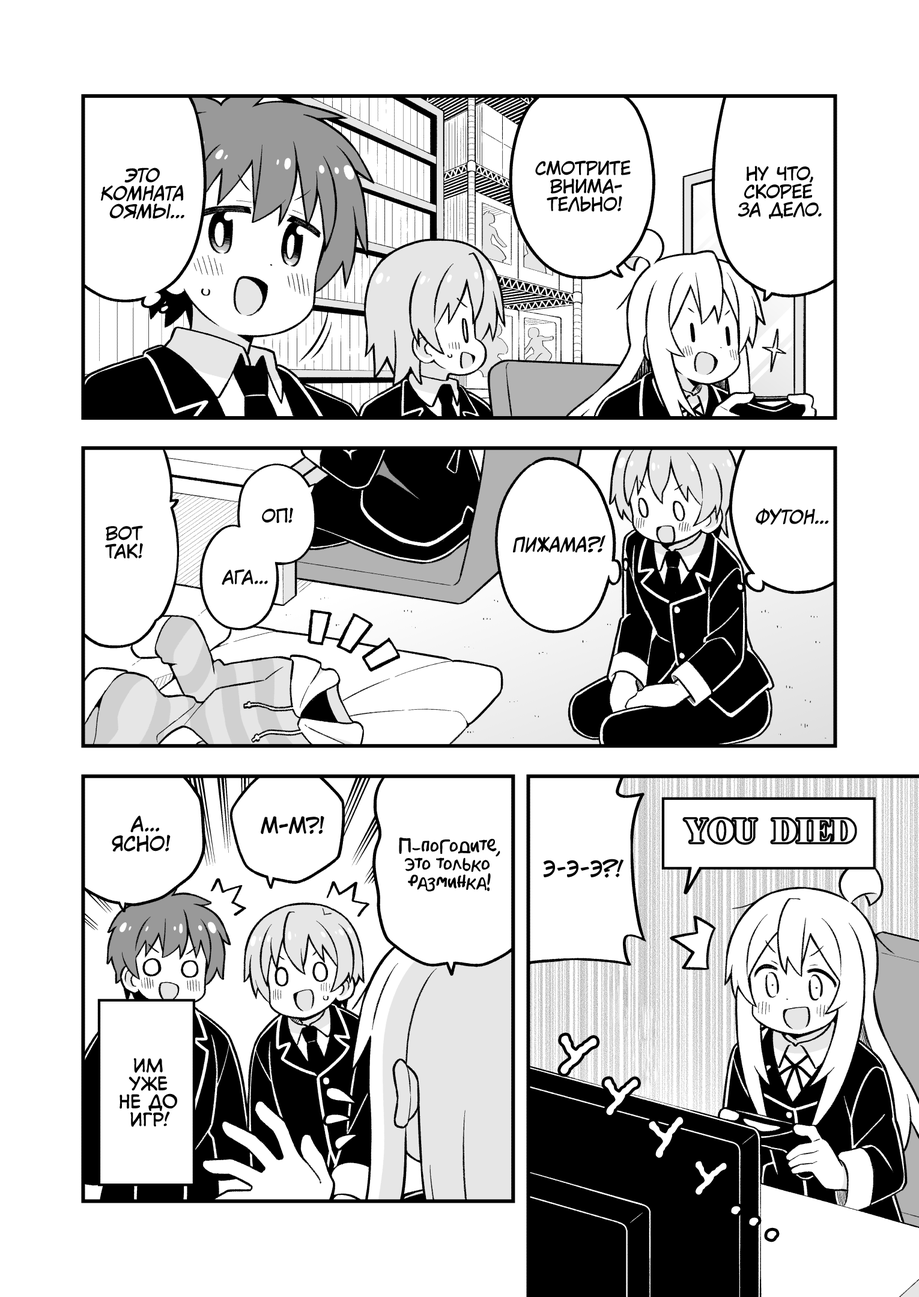
<style>
.page{position:relative;width:919px;height:1297px;background:#ffffff}
.page>*{position:absolute;margin:0}
.t1{font:18px "KuraiVoice2";color:#000000;text-transform:uppercase}
.t2{font:18px "CCMeanwhile";color:#000000;text-transform:uppercase;font-style:italic}
.t3{font:19.8px "KuraiVoice2";color:#000000;text-transform:uppercase}
.t4{font:21.6px "KuraiVoice2";color:#000000;text-transform:uppercase}
.t5{font:18px "AkbarPlain";color:#000000}
.t6{font:21.6px "v_CCJeffCampbell";color:#000000;text-transform:uppercase}
.t7{font:57.7px "el_CCEvilSchemes";color:#ffffff;text-transform:uppercase}
.t8{font:18px "v_CCMonologous";color:#000000;text-transform:uppercase}
.t9{font:54.1px "el_CCEvilSchemes";color:#ffffff;text-transform:uppercase}
.t10{font:55.9px "el_CCEvilSchemes";color:#ffffff;text-transform:uppercase}
.t11{font:50.5px "el_CCEvilSchemes";color:#ffffff;text-transform:uppercase}
</style>
<div class="page">
<p class="t1" style="left:535px;top:160px;width:96px;height:52px;text-align:center">Смотрите<br>внима-<br>тельно!</p>
<p class="t2" style="left:101px;top:168px;width:83px;height:52px;text-align:center">Это<br>комната<br>Оямы...</p>
<p class="t1" style="left:738px;top:166px;width:84px;height:53px;text-align:center">Ну что,<br>скорее<br>за дело.</p>
<p class="t1" style="left:262px;top:508px;width:31px;height:15px">Оп!</p>
<p class="t2" style="left:756px;top:508px;width:73px;height:17px">Футон...</p>
<p class="t1" style="left:105px;top:526px;width:38px;height:33px;text-align:center">Вот<br>так!</p>
<p class="t2" style="left:513px;top:535px;width:92px;height:18px">Пижама?!</p>
<p class="t1" style="left:222px;top:569px;width:46px;height:16px">Ага...</p>
<p class="t3" style="left:112px;top:816px;width:59px;height:36px;text-align:center">А...<br>Ясно!</p>
<p class="t4" style="left:261px;top:816px;width:63px;height:18px">М-м?!</p>
<p class="t5" style="left:399px;top:837px;width:101px;height:55px;text-align:center">П-погодите,<br>это только<br>разминка!</p>
<p class="t6" style="left:543px;top:859px;width:81px;height:19px">Э-э-э?!</p>
<p class="t7" style="left:560px;top:1036px;width:37px;height:39px;rotate:14deg">у</p>
<p class="t8" style="left:120px;top:1058px;width:57px;height:69px;text-align:center">Им<br>уже<br>не до<br>игр!</p>
<p class="t9" style="left:604px;top:1079px;width:34px;height:36px;rotate:10deg">у</p>
<p class="t10" style="left:649px;top:1117px;width:35px;height:41px">у</p>
<p class="t11" style="left:696px;top:1162px;width:31px;height:33px;rotate:13deg">у</p>
<p class="t9" style="left:731px;top:1206px;width:10px;height:9px">.</p>
<p class="t9" style="left:749px;top:1218px;width:10px;height:9px">.</p>
<p class="t9" style="left:767px;top:1231px;width:10px;height:9px">.</p>
</div>
